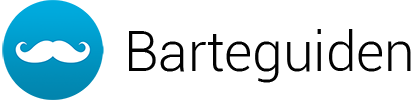
<style>
.page{position:relative;width:415px;height:100px;background:#ffffff}
.page>*{position:absolute;margin:0}
.t1{font:54.6px "Roboto-Light";color:#020202}
</style>
<div class="page">
<p class="t1" style="left:129px;top:29px;width:282px;height:54px">Barteguiden</p>
</div>
